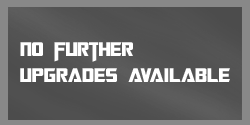
<style>
.page{position:relative;width:250px;height:125px}
.page>*{position:absolute;margin:0}
.t1{font:22px "TransformersMovie";color:#ffffff}
.t2{font:22px "TransformersMovie";letter-spacing:0.02em;color:#ffffff}
.t3{font:22px "TransformersMovie";letter-spacing:0.04em;color:#ffffff}
.t4{font:22px "TransformersMovie";letter-spacing:-0.1em;color:#ffffff}
</style>
<div class="page">
<p class="t1" style="left:20px;top:42px;width:210px;height:40px">No further<br><span class="t2">up</span><span class="t3">g</span>ra<span class="t2">d</span>es <span class="t4">av</span><span class="t2">a</span><span class="t3">i</span>la<span class="t2">b</span>le</p>
</div>
